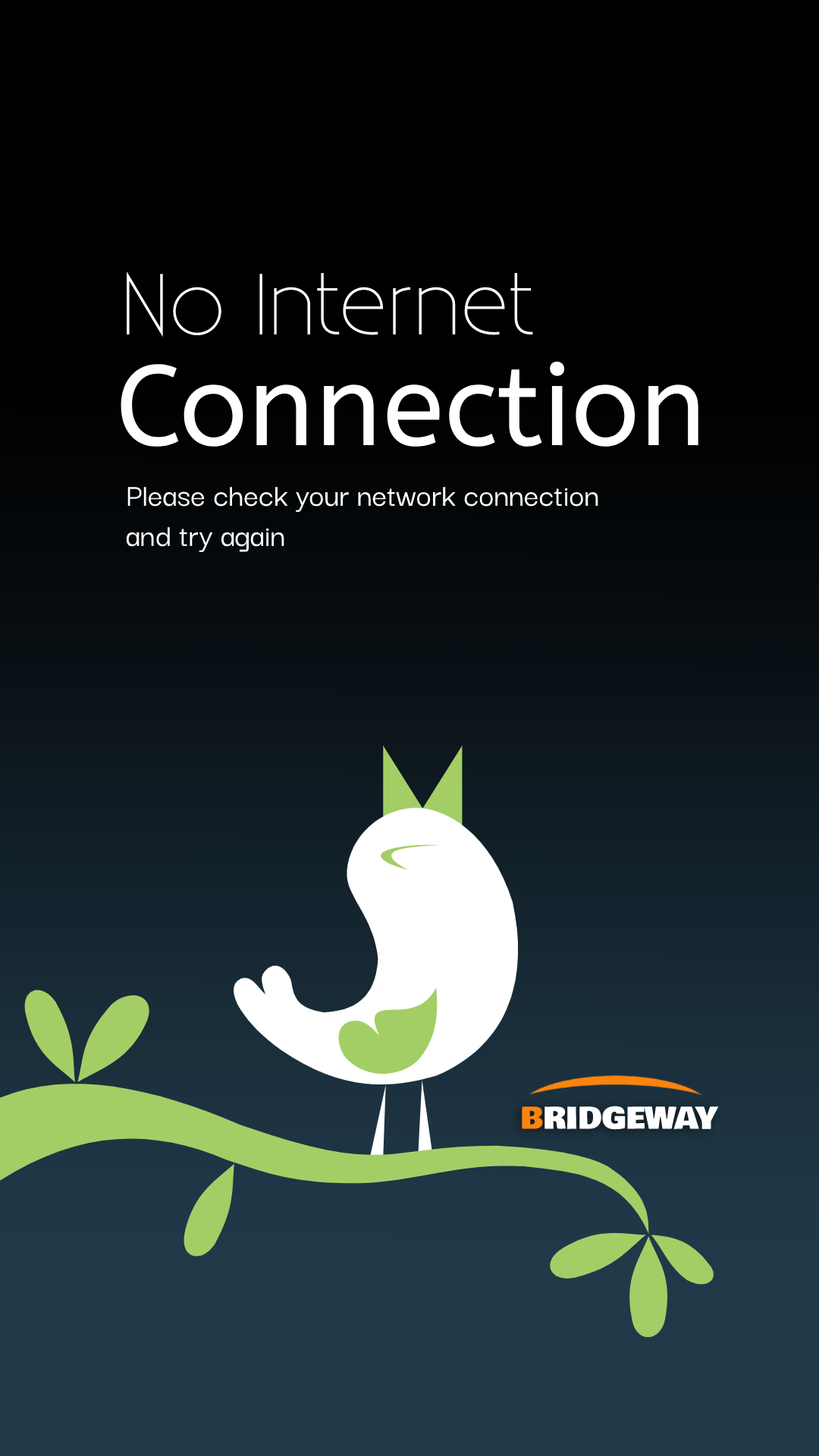
<style>
.page{position:relative;width:819px;height:1456px;background:#000000}
.page>*{position:absolute;margin:0}
.t1{font:86.4px "Existence-Light";color:#ffffff}
.t2{font:113.7px "ABeeZee-Regular";color:#ffffff}
.t3{font:33.4px "DarkerGrotesque-Medium";color:#ffffff}
.t4{font:29.6px "BowlbyOne-Regular";color:#ffffff}
.t5{font:29.6px "BowlbyOne-Regular";color:#fb840e}
</style>
<div class="page">
<p class="t1" style="left:127px;top:271px;width:406px;height:66px">No Internet</p>
<p class="t2" style="left:121px;top:361px;width:577px;height:86px">Connection</p>
<p class="t3" style="left:126px;top:487px;width:472px;height:66px">Please check your network connection<br>and try again</p>
<p class="t4" style="left:522px;top:1106px;width:197px;height:24px"><span class="t5">B</span>RIDGEWAY</p>
</div>
